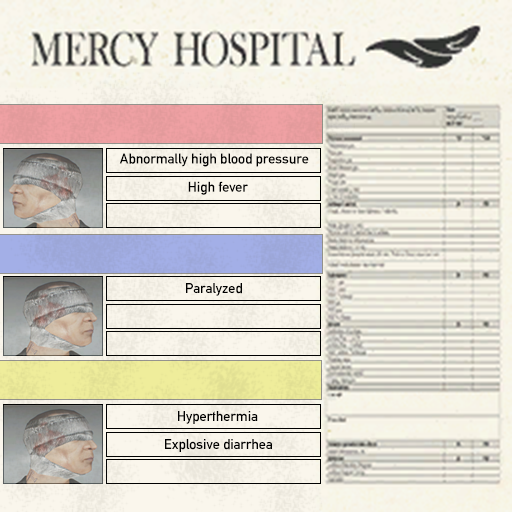
<style>
.page{position:relative;width:512px;height:512px}
.page>*{position:absolute;margin:0}
.t1{font:14px "AlteDIN1451Mittelschrift";color:#000000}
</style>
<div class="page">
<p class="t1" style="left:119px;top:153px;width:190px;height:14px">Abnormally high blood pressure</p>
<p class="t1" style="left:188px;top:181px;width:60px;height:14px">High fever</p>
<p class="t1" style="left:186px;top:283px;width:56px;height:13px">Paralyzed</p>
<p class="t1" style="left:178px;top:411px;width:80px;height:13px">Hyperthermia</p>
<p class="t1" style="left:165px;top:439px;width:107px;height:13px">Explosive diarrhea</p>
</div>
